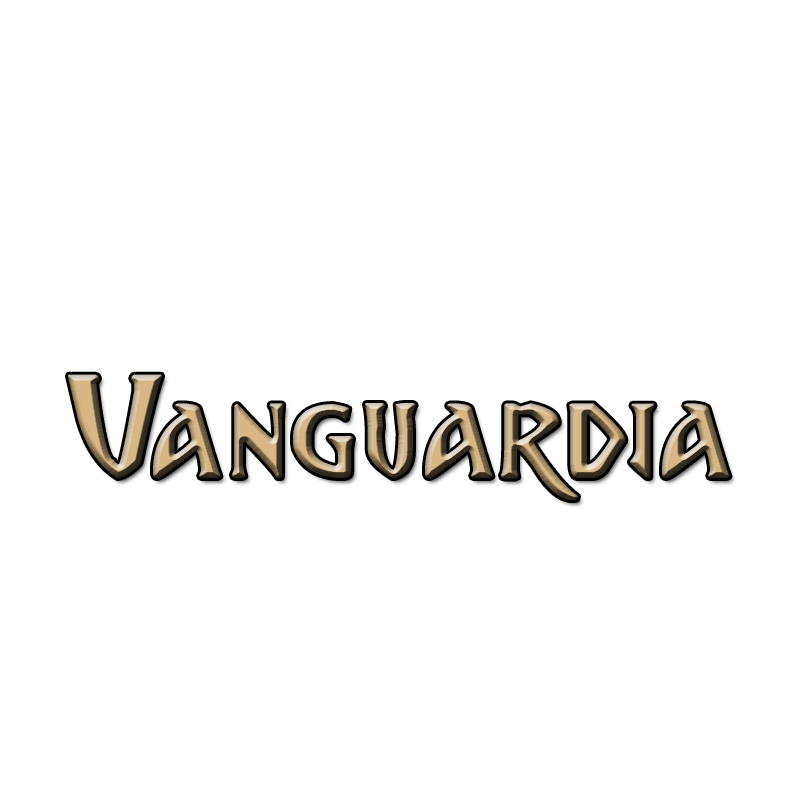
<style>
.page{position:relative;width:800px;height:800px;background:#ffffff}
.page>*{position:absolute;margin:0}
.t1{font:144.7px "BreatheFire";letter-spacing:0.02em;font-weight:bold}
</style>
<div class="page">
<p class="t1" style="left:68px;top:374px;width:662px;height:126px">Vanguardia</p>
</div>
